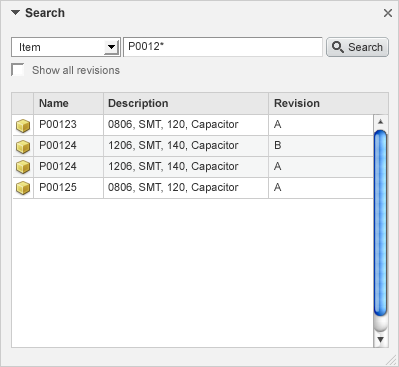
<style>
.page{position:relative;width:399px;height:367px;background:#ffffff}
.page>*{position:absolute;margin:0}
.t1{font:12px "Arial-BoldMT";color:#333333}
.t2{font:11px "ArialMT";color:#333333}
.t3{font:11px "ArialMT";color:#666666}
.t4{font:11px/21px "ArialMT";color:#333333}
.t5{font:11px/21px "Arial-BoldMT";color:#333333}
</style>
<div class="page">
<p class="t1" style="left:25px;top:8px;width:40px;height:10px">Search</p>
<p class="t2" style="left:20px;top:43px;width:20px;height:8px">Item</p>
<p class="t2" style="left:129px;top:42px;width:35px;height:8px">P0012*</p>
<p class="t2" style="left:348px;top:43px;width:35px;height:8px">Search</p>
<p class="t3" style="left:32px;top:66px;width:88px;height:8px">Show all revisions</p>
<p class="t4" style="left:39px;top:99px;width:38px;height:92px"><span class="t5">Name<br></span>P00123<br>P00124<br>P00124<br>P00125</p>
<p class="t4" style="left:108px;top:99px;width:131px;height:95px"><span class="t5">Description<br></span>0806, SMT, 120, Capacitor<br>1206, SMT, 140, Capacitor<br>1206, SMT, 140, Capacitor<br>0806, SMT, 120, Capacitor</p>
<p class="t5" style="left:274px;top:99px;width:46px;height:92px">Revision<br><span class="t4">A<br>B <br>A<br>A</span></p>
</div>
